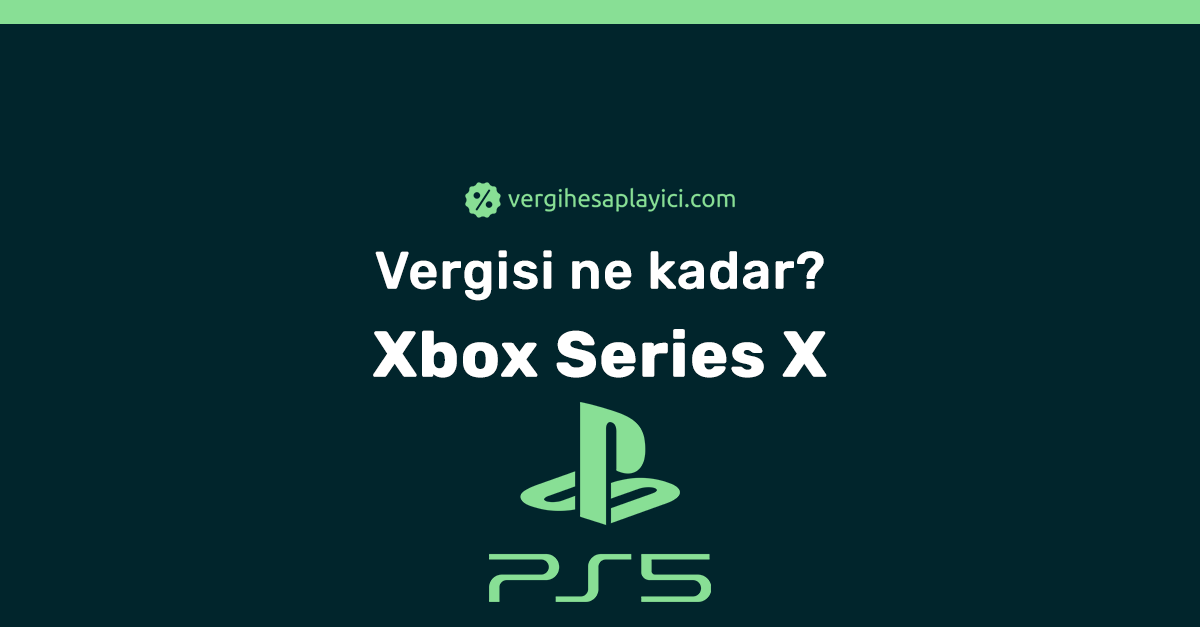
<style>
.page{position:relative;width:1200px;height:627px;background:#01252c}
.page>*{position:absolute;margin:0}
.t1{font:52px/88px "Rubik-Medium";color:#ffffff;font-weight:bold}
.t2{font:64px/88px "Rubik-Bold";color:#ffffff;font-weight:bold}
</style>
<div class="page">
<p class="t1" style="left:373px;top:250px;width:454px;height:128px;text-align:center">Vergisi ne kadar?<br><span class="t2">Xbox Series X</span></p>
</div>
